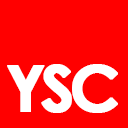
<style>
.page{position:relative;width:128px;height:128px;background:#ff0000}
.page>*{position:absolute;margin:0}
.t1{font:64.2px "CenturyGothic-Bold";letter-spacing:-0.1em;color:#ffffff;font-weight:bold}
</style>
<div class="page">
<p class="t1" style="left:7px;top:64px;width:111px;height:49px">YSC</p>
</div>
